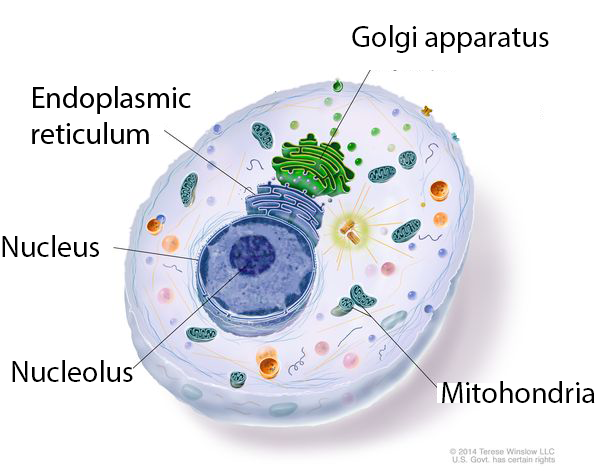
<style>
.page{position:relative;width:615px;height:471px;background:#ffffff}
.page>*{position:absolute;margin:0}
.t1{font:30px "MyriadPro-Regular";color:#000000}
</style>
<div class="page">
<p class="t1" style="left:352px;top:25px;width:197px;height:28px">Golgi apparatus</p>
<p class="t1" style="left:2px;top:235px;width:97px;height:22px">Nucleus</p>
<p class="t1" style="left:12px;top:360px;width:121px;height:22px">Nucleolus</p>
<p class="t1" style="left:442px;top:381px;width:153px;height:22px">Mitohondria</p>
</div>
